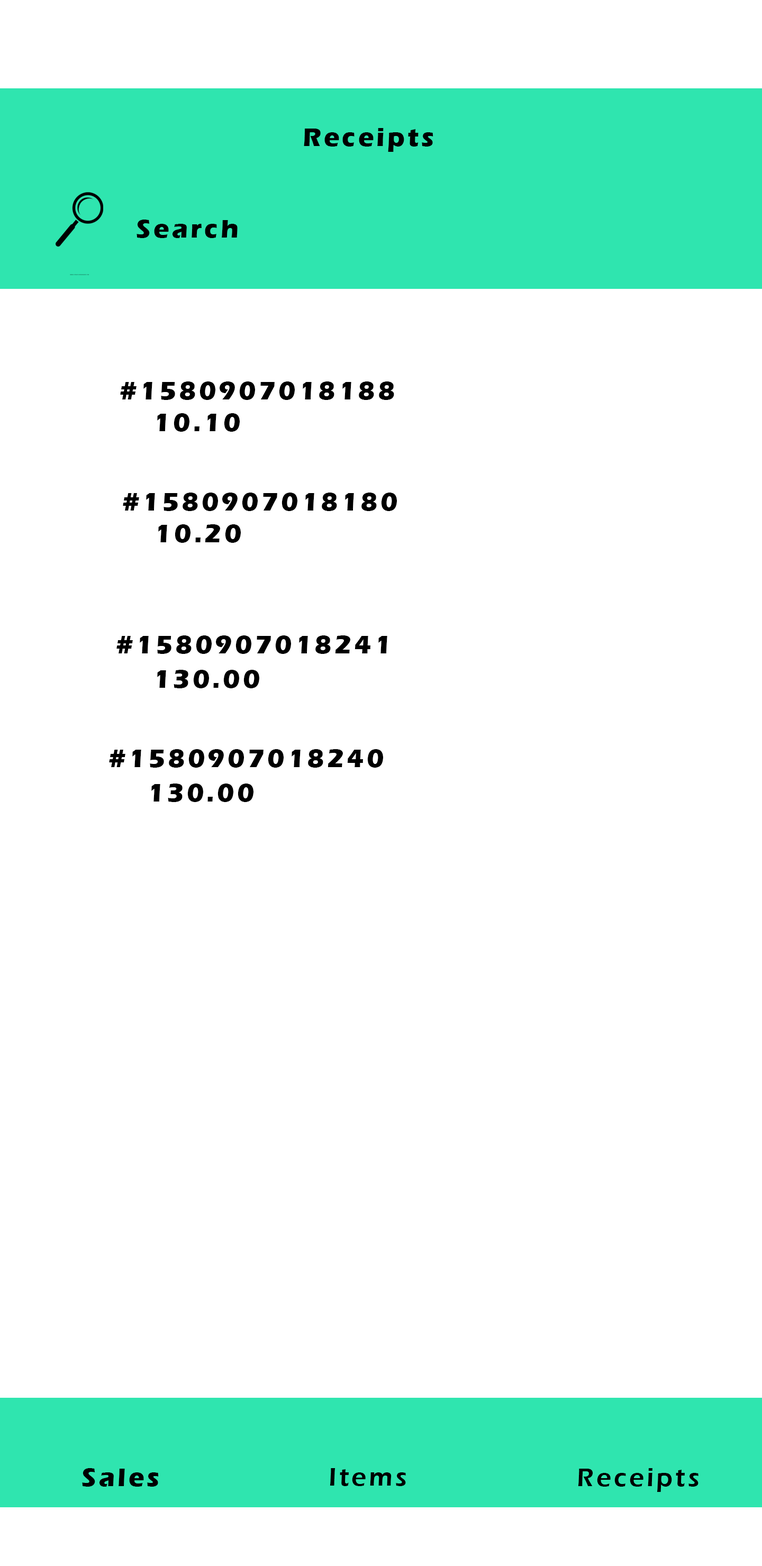
<style>
.page{position:relative;width:762px;height:1566px;background:#ffffff}
.page>*{position:absolute;margin:0}
.t1{font:26.4px "ErasITC-Bold";letter-spacing:0.1em;color:#000000}
.t2{font:26.4px "ErasITC-Demi";letter-spacing:0.1em;color:#000000}
</style>
<div class="page">
<p class="t1" style="left:304px;top:128px;width:129px;height:24px">Receipts</p>
<p class="t1" style="left:136px;top:220px;width:101px;height:18px">Search</p>
<p class="t1" style="left:120px;top:381px;width:274px;height:19px">#1580907018188</p>
<p class="t1" style="left:157px;top:413px;width:83px;height:19px">10.10</p>
<p class="t1" style="left:123px;top:492px;width:274px;height:19px">#1580907018180</p>
<p class="t1" style="left:158px;top:524px;width:83px;height:19px">10.20</p>
<p class="t1" style="left:116px;top:635px;width:271px;height:19px">#1580907018241</p>
<p class="t1" style="left:157px;top:670px;width:102px;height:18px">130.00</p>
<p class="t1" style="left:109px;top:749px;width:274px;height:18px">#1580907018240</p>
<p class="t1" style="left:151px;top:783px;width:102px;height:19px">130.00</p>
<p class="t1" style="left:82px;top:1468px;width:77px;height:18px">Sales</p>
<p class="t2" style="left:330px;top:1468px;width:76px;height:18px">Items</p>
<p class="t2" style="left:578px;top:1468px;width:120px;height:24px">Receipts</p>
</div>
